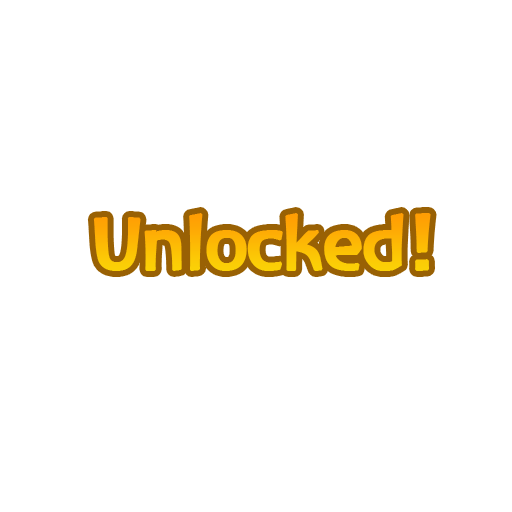
<style>
.page{position:relative;width:512px;height:512px;background:#ffffff}
.page>*{position:absolute;margin:0}
.t1{font:72px "BaarZeitgeist";color:#fdbc05}
</style>
<div class="page">
<p class="t1" style="left:93px;top:213px;width:338px;height:58px">Unlocked!</p>
</div>
